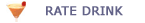
<style>
.page{position:relative;width:145px;height:23px;background:#ffffff}
.page>*{position:absolute;margin:0}
.t1{font:12px "Verdana";color:#636388;font-weight:bold}
</style>
<div class="page">
<p class="t1" style="left:46px;top:6px;width:77px;height:10px">RATE DRINK</p>
</div>
